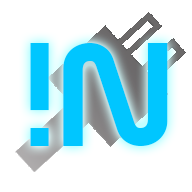
<style>
.page{position:relative;width:192px;height:192px;background:#ffffff}
.page>*{position:absolute;margin:0}
.t1{font:150px "NasalizationRg-Regular";color:#00c6ff}
</style>
<div class="page">
<p class="t1" style="left:30px;top:43px;width:138px;height:103px">N!</p>
</div>
